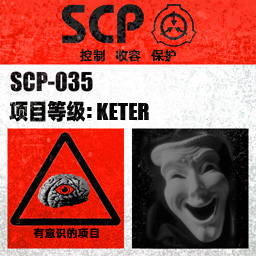
<style>
.page{position:relative;width:256px;height:256px}
.page>*{position:absolute;margin:0}
.t1{font:13px "AlibabaPuHuiTiM"}
.t2{font:26px "URWImpactW01-Bold";letter-spacing:0.02em;color:#000000}
.t3{font:22px "AlibabaPuHuiTiH";letter-spacing:-0.02em;color:#000000;scale:0.9 1}
.t4{font:22px "AlibabaPuHuiTiH";color:#000000;scale:0.9 1}
.t5{font:31px "URWImpactW01-Bold";color:#000000}
.t6{font:11px "AlibabaPuHuiTiM";letter-spacing:0.02em;color:#000000}
</style>
<div class="page">
<p class="t1" style="left:80px;top:49px;width:96px;height:13px">控制   收容   保护</p>
<p class="t2" style="left:9px;top:100px;width:140px;height:22px"><span class="t3">项目等</span><span class="t4">级</span><span class="t5">: </span>KETER</p>
<p class="t6" style="left:33px;top:227px;width:66px;height:12px">有意识的项目</p>
</div>
